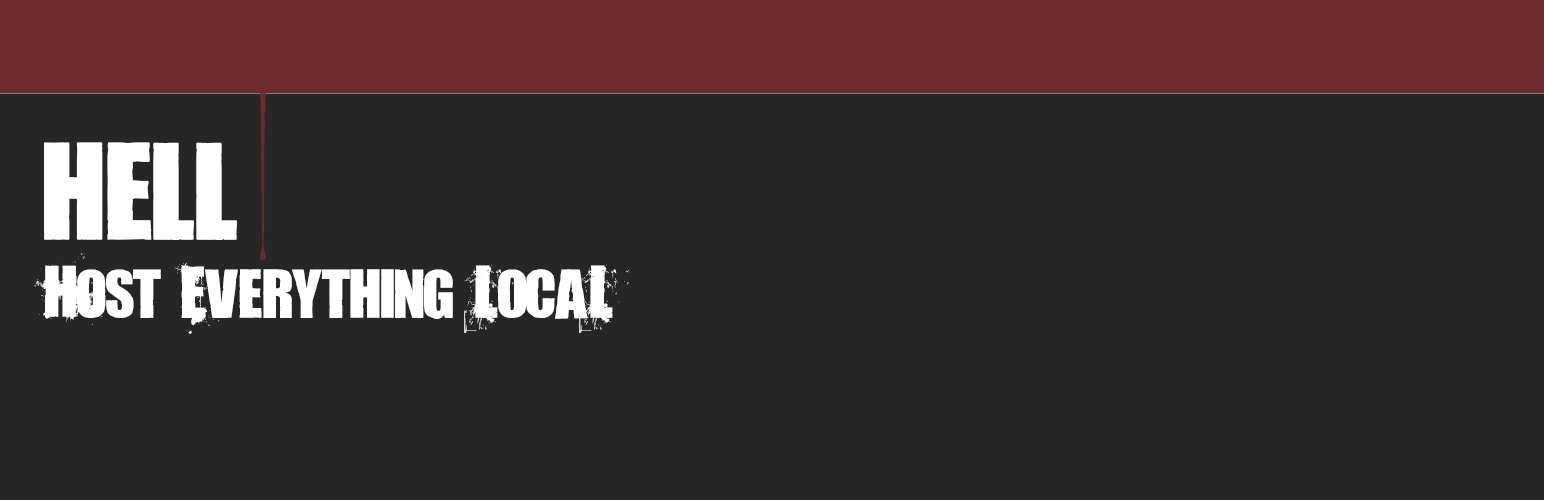
<style>
.page{position:relative;width:1544px;height:500px;background:#262626}
.page>*{position:absolute;margin:0}
.t1{font:144px "LivingHell";color:#ffffff}
.t2{font:72px "LivingHell";color:#ffffff}
</style>
<div class="page">
<p class="t1" style="left:44px;top:142px;width:193px;height:98px">hell</p>
<p class="t2" style="left:34px;top:253px;width:596px;height:81px">Host Everything LocaL</p>
</div>
